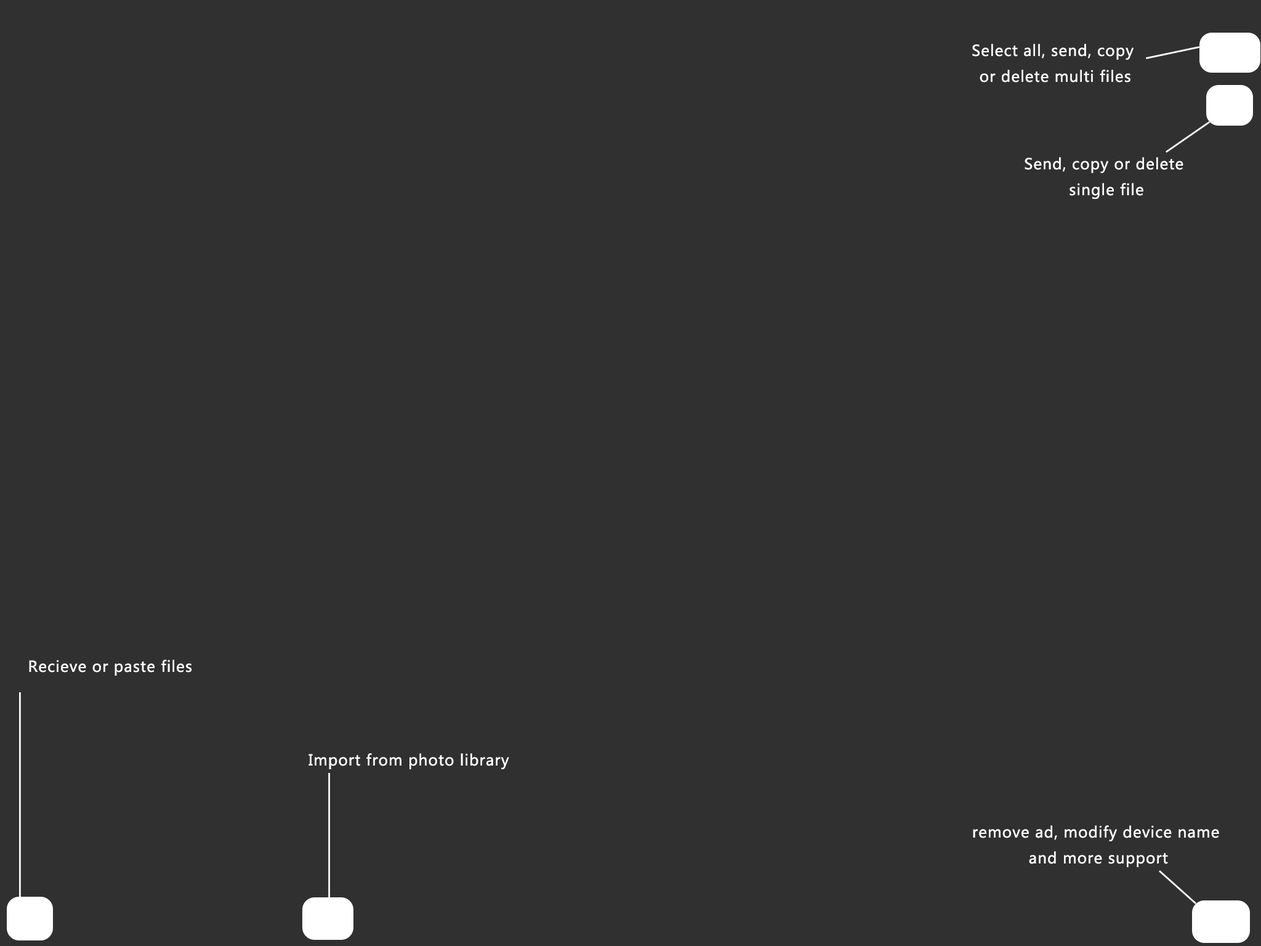
<style>
.page{position:relative;width:1261px;height:946px;background:#303030}
.page>*{position:absolute;margin:0}
.t1{font:14.8px "MicrosoftYaHei";letter-spacing:0.05em;color:#ffffff}
</style>
<div class="page">
<p class="t1" style="left:972px;top:44px;width:161px;height:39px;text-align:center">Select all, send, copy <br>or delete multi files</p>
<p class="t1" style="left:1024px;top:157px;width:159px;height:42px;text-align:center">Send, copy or delete<br> single file</p>
<p class="t1" style="left:29px;top:659px;width:163px;height:16px">Recieve or paste files</p>
<p class="t1" style="left:308px;top:753px;width:201px;height:16px">Import from photo library</p>
<p class="t1" style="left:973px;top:825px;width:246px;height:42px;text-align:center">remove ad, modify device name <br>and more support</p>
</div>
